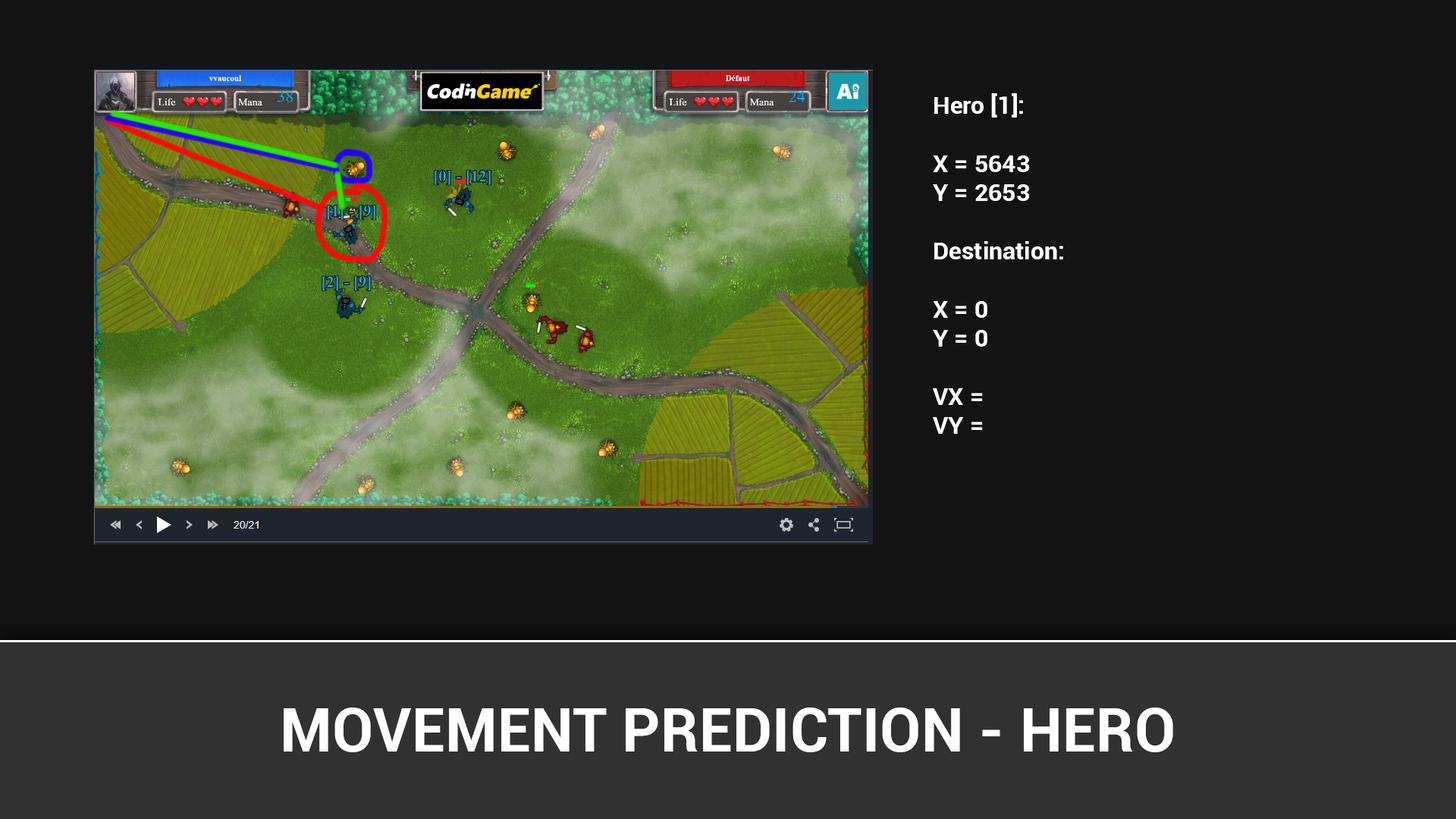
<style>
.page{position:relative;width:1456px;height:819px;background:#131313}
.page>*{position:absolute;margin:0}
.t1{font:24.3px "Roboto-Bold";color:#ffffff}
.t2{font:60.2px "Roboto-Bold";color:#ffffff}
</style>
<div class="page">
<p class="t1" style="left:933px;top:93px;width:130px;height:341px">Hero [1]:<br><br>X = 5643<br>Y = 2653<br><br>Destination:<br><br>X = 0<br>Y = 0<br><br>VX = <br>VY =</p>
<p class="t2" style="left:284px;top:708px;width:889px;height:44px">MOVEMENT PREDICTION - HERO</p>
</div>
